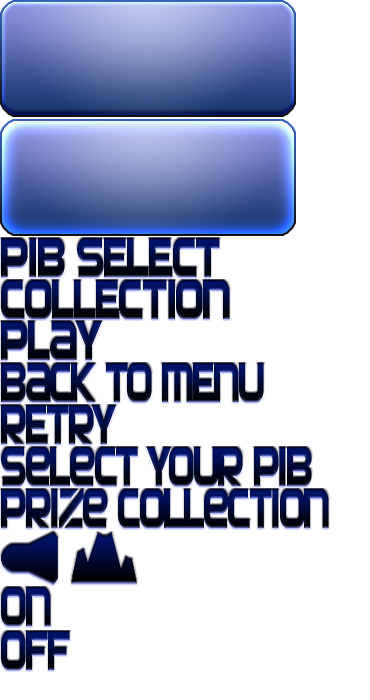
<style>
.page{position:relative;width:370px;height:700px;background:#ffffff}
.page>*{position:absolute;margin:0}
.t1{font:58.1px "SFAutomaton";scale:0.7 1}
.t2{font:58.1px "SFAutomaton";scale:0.63 1}
.t3{font:58.1px "SFAutomaton";scale:0.64 1}
</style>
<div class="page">
<p class="t1" style="left:1px;top:238px;width:219px;height:39px">PIB SELECT</p>
<p class="t1" style="left:1px;top:280px;width:229px;height:39px">COLLECTION</p>
<p class="t1" style="left:1px;top:321px;width:101px;height:39px">PLAY</p>
<p class="t2" style="left:1px;top:363px;width:263px;height:39px">BACK TO MENU</p>
<p class="t2" style="left:1px;top:405px;width:116px;height:39px">RETRY</p>
<p class="t2" style="left:1px;top:447px;width:311px;height:39px">Select Your Pib</p>
<p class="t2" style="left:1px;top:489px;width:328px;height:39px">Prize Collection</p>
<p class="t2" style="left:1px;top:587px;width:50px;height:39px">ON</p>
<p class="t3" style="left:1px;top:631px;width:69px;height:39px">OFF</p>
</div>
